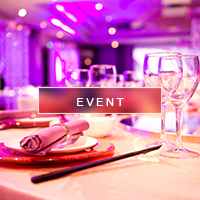
<style>
.page{position:relative;width:200px;height:200px}
.page>*{position:absolute;margin:0}
.t1{font:11.9px "IstokWeb-Regular";letter-spacing:0.2em;color:#ffffff;text-transform:uppercase}
</style>
<div class="page">
<p class="t1" style="left:77px;top:98px;width:47px;height:8px">EVENT</p>
</div>
